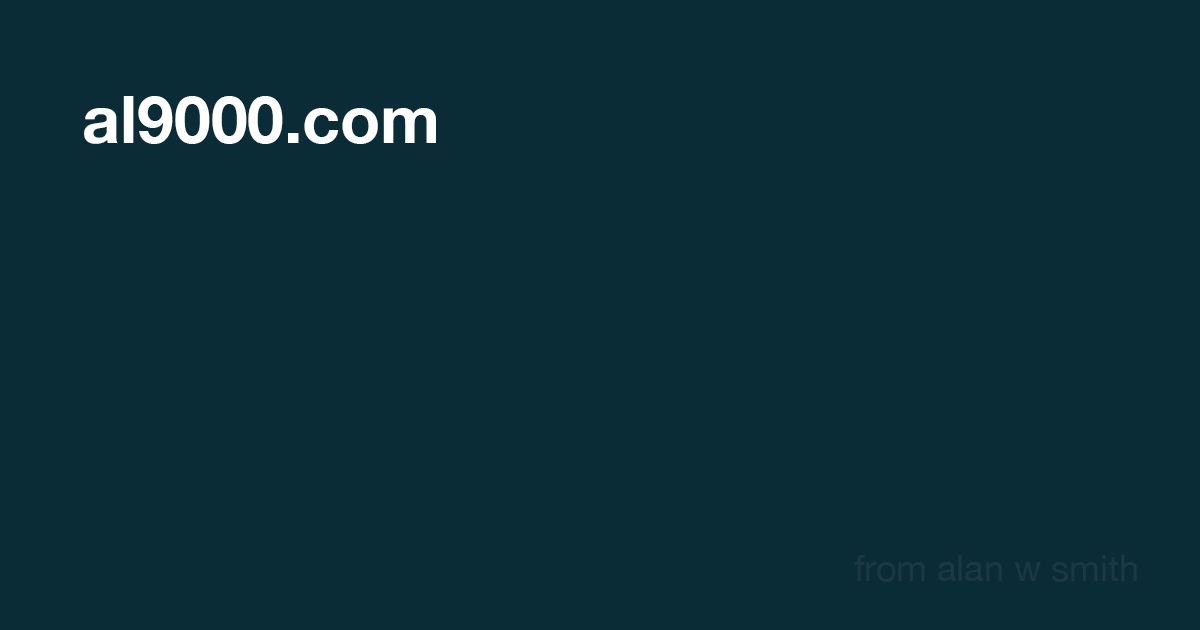
<style>
.page{position:relative;width:1200px;height:630px;background:#0a2c36}
.page>*{position:absolute;margin:0}
.t1{font:66px "HelveticaNeue-Bold";color:#ffffff}
.t2{font:36px "HelveticaNeue";color:#1c3841}
</style>
<div class="page">
<p class="t1" style="left:84px;top:96px;width:352px;height:48px">al9000.com</p>
<p class="t2" style="left:854px;top:555px;width:283px;height:27px">from alan w smith</p>
</div>
